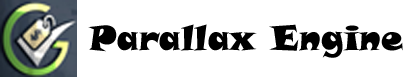
<style>
.page{position:relative;width:415px;height:77px;background:#ffffff}
.page>*{position:absolute;margin:0}
.t1{font:34.6px "SnapITC-Regular";color:#000000}
</style>
<div class="page">
<p class="t1" style="left:88px;top:24px;width:315px;height:34px">Parallax Engine</p>
</div>
